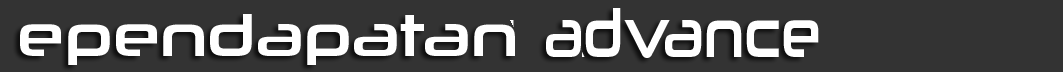
<style>
.page{position:relative;width:1063px;height:72px;background:#333333}
.page>*{position:absolute;margin:0}
.t1{font:58.3px "NeuropoliticalRg-Regular";color:#ffffff}
</style>
<div class="page">
<p class="t1" style="left:20px;top:14px;width:495px;height:51px">ependapatan</p>
</div>
